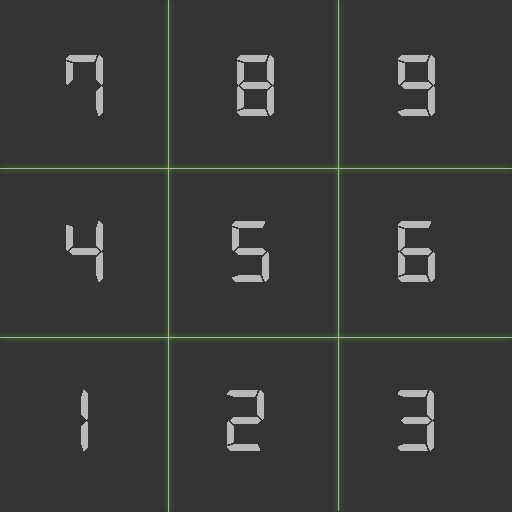
<style>
.page{position:relative;width:512px;height:512px;background:#333333}
.page>*{position:absolute;margin:0}
.t1{font:93.8px "Digital-7";color:#b8b8b8}
</style>
<div class="page">
<p class="t1" style="left:66px;top:55px;width:37px;height:61px">7</p>
<p class="t1" style="left:237px;top:55px;width:37px;height:61px">8</p>
<p class="t1" style="left:398px;top:55px;width:37px;height:61px">9</p>
<p class="t1" style="left:66px;top:221px;width:37px;height:61px">4</p>
<p class="t1" style="left:232px;top:221px;width:37px;height:61px">5</p>
<p class="t1" style="left:398px;top:221px;width:37px;height:61px">6</p>
<p class="t1" style="left:81px;top:390px;width:7px;height:61px">1</p>
<p class="t1" style="left:227px;top:390px;width:37px;height:61px">2</p>
<p class="t1" style="left:398px;top:390px;width:36px;height:61px">3</p>
</div>
